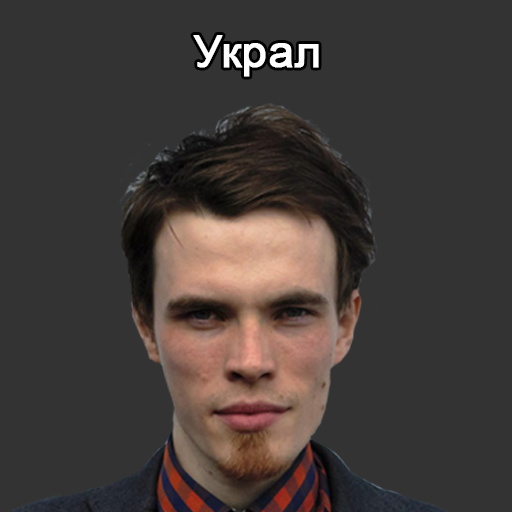
<style>
.page{position:relative;width:512px;height:512px;background:#333333}
.page>*{position:absolute;margin:0}
.t1{font:45px "ArialMT";color:#ffffff;font-weight:bold}
</style>
<div class="page">
<p class="t1" style="left:193px;top:35px;width:126px;height:42px">Украл</p>
</div>
